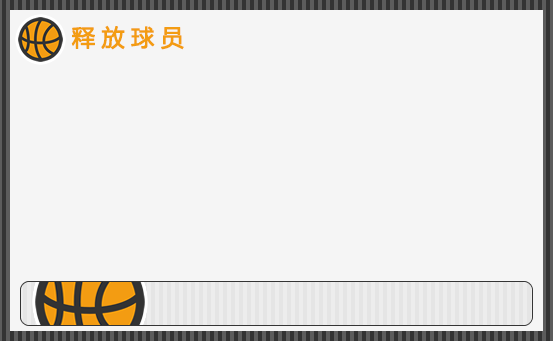
<style>
.page{position:relative;width:553px;height:341px;background:#f5f5f5}
.page>*{position:absolute;margin:0}
.t1{font:23px "MicrosoftYaHei";letter-spacing:0.26em;color:#f39c12;font-weight:bold}
</style>
<div class="page">
<p class="t1" style="left:71px;top:25px;width:113px;height:25px">释放球员</p>
</div>
